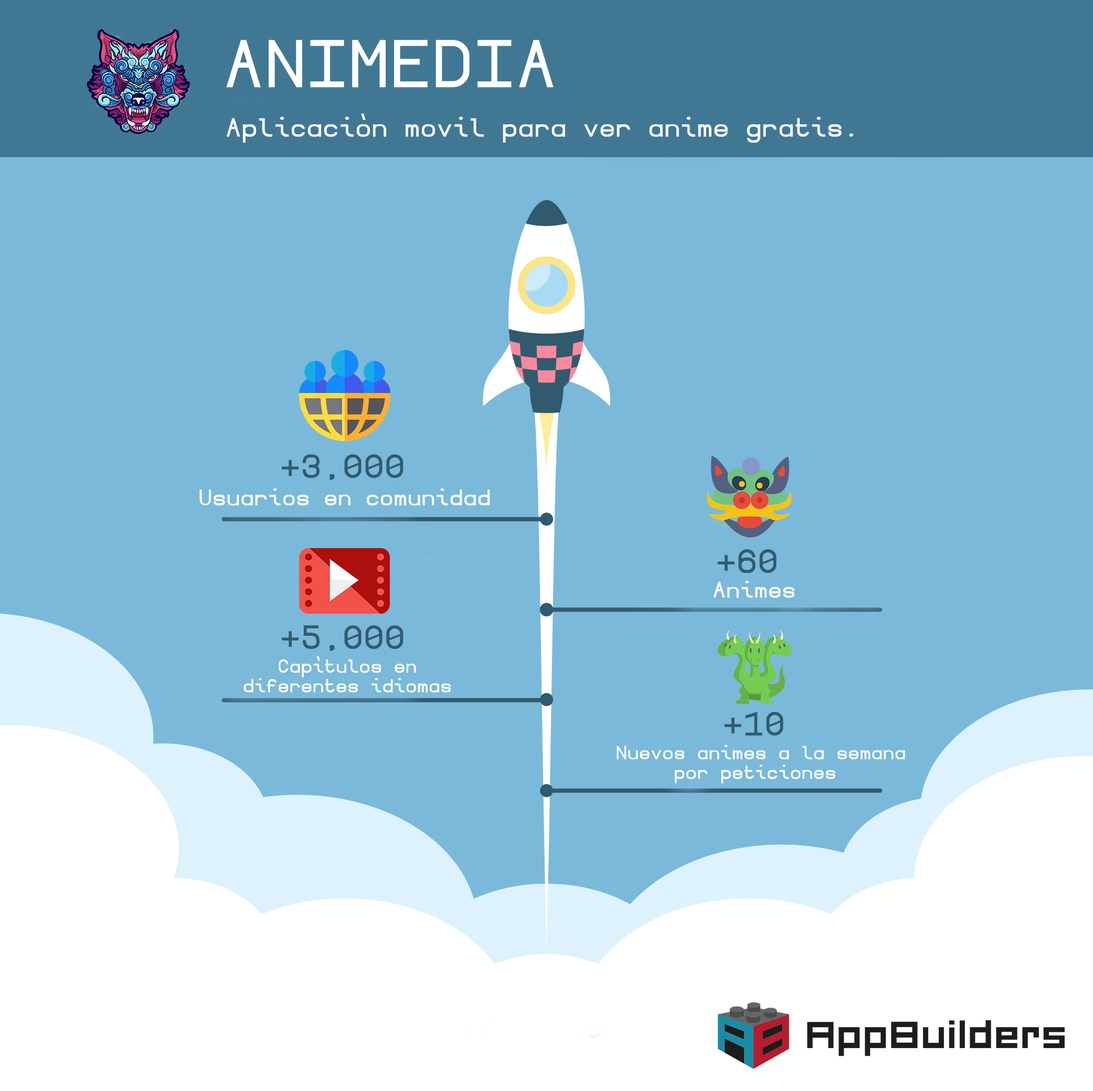
<style>
.page{position:relative;width:1093px;height:1091px;background:#7ab9d9}
.page>*{position:absolute;margin:0}
.t1{font:78.7px "BorgenBold";color:#ffffff}
.t2{font:30.6px "BorgenBold";color:#ffffff}
.t3{font:39.3px "BorgenBold";color:#325a6e}
.t4{font:26.2px "BorgenBold";color:#ffffff}
.t5{font:21.9px/19.7px "BorgenBold";color:#ffffff}
</style>
<div class="page">
<p class="t1" style="left:226px;top:40px;width:327px;height:48px">ANIMEDIA</p>
<p class="t2" style="left:226px;top:113px;width:627px;height:30px">Aplicaciòn movil para ver anime gratis.</p>
<p class="t3" style="left:282px;top:454px;width:121px;height:26px">+3,000</p>
<p class="t4" style="left:199px;top:488px;width:291px;height:18px">Usuarios en comunidad</p>
<p class="t3" style="left:717px;top:549px;width:59px;height:24px">+60</p>
<p class="t4" style="left:713px;top:580px;width:81px;height:18px">Animes</p>
<p class="t3" style="left:282px;top:625px;width:121px;height:26px">+5,000</p>
<p class="t5" style="left:243px;top:656px;width:208px;height:36px;text-align:center">Capìtulos en<br>diferentes idiomas</p>
<p class="t3" style="left:724px;top:711px;width:59px;height:25px">+10</p>
<p class="t5" style="left:616px;top:745px;width:289px;height:39px;text-align:center">Nuevos animes a la semana<br>por peticiones</p>
</div>
